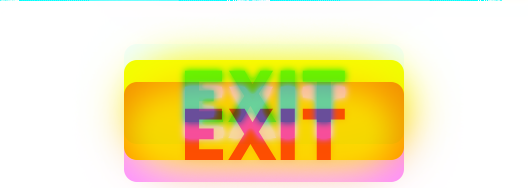
<style>
.page{position:relative;width:528px;height:188px;background:#ffffff}
.page>*{position:absolute;margin:0}
.t1{font:77px "FranklinGothic"}
</style>
<div class="page">
<p class="t1" style="left:184px;top:70px;width:161px;height:52px">EXIT</p>
</div>
